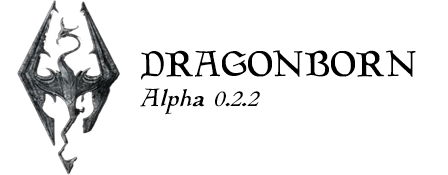
<style>
.page{position:relative;width:448px;height:175px;background:#ffffff}
.page>*{position:absolute;margin:0}
.t1{font:25px "Planewalker-Italic";color:#000000}
.t2{font:36px "Planewalker";color:#000000}
</style>
<div class="page">
<p class="t1" style="left:140px;top:50px;width:276px;height:65px"><span class="t2">DRAGONBORN<br></span>Alpha 0.2.2</p>
</div>
